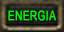
<style>
.page{position:relative;width:64px;height:32px}
.page>*{position:absolute;margin:0}
.t1{font:13.1px "ArialMT";letter-spacing:0.025em;color:#00ff00;font-weight:bold;scale:0.76 1}
</style>
<div class="page">
<p class="t1" style="left:8px;top:10px;width:48px;height:11px">ENERGIA</p>
</div>
